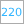
<style>
.page{position:relative;width:24px;height:24px;background:#ffffff}
.page>*{position:absolute;margin:0}
.t1{font:11.3px "DejaVuSans";color:#32b6ff}
</style>
<div class="page">
<p class="t1" style="left:1px;top:7px;width:21px;height:10px">220</p>
</div>
